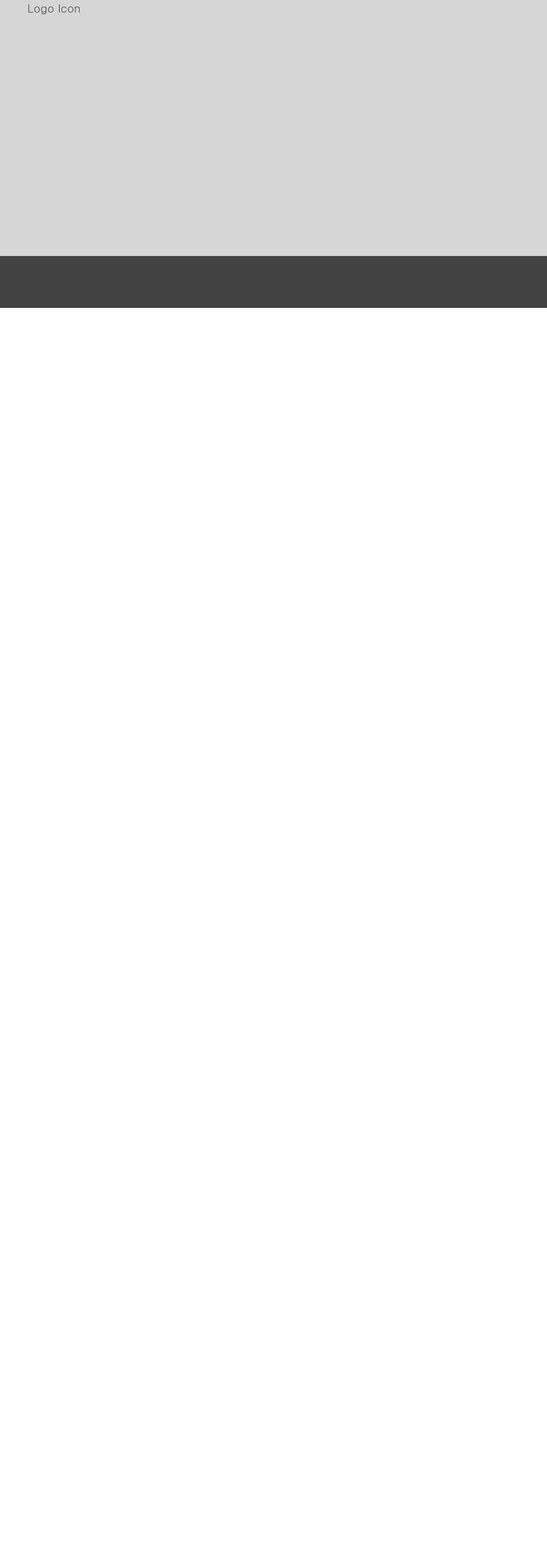
<style>
.page{position:relative;width:547px;height:1568px;background:#ffffff}
.page>*{position:absolute;margin:0}
.t1{font:11.4px "Dotum";color:#424242}
</style>
<div class="page">
<p class="t1" style="left:28px;top:4px;width:52px;height:10px">Logo Icon</p>
</div>
